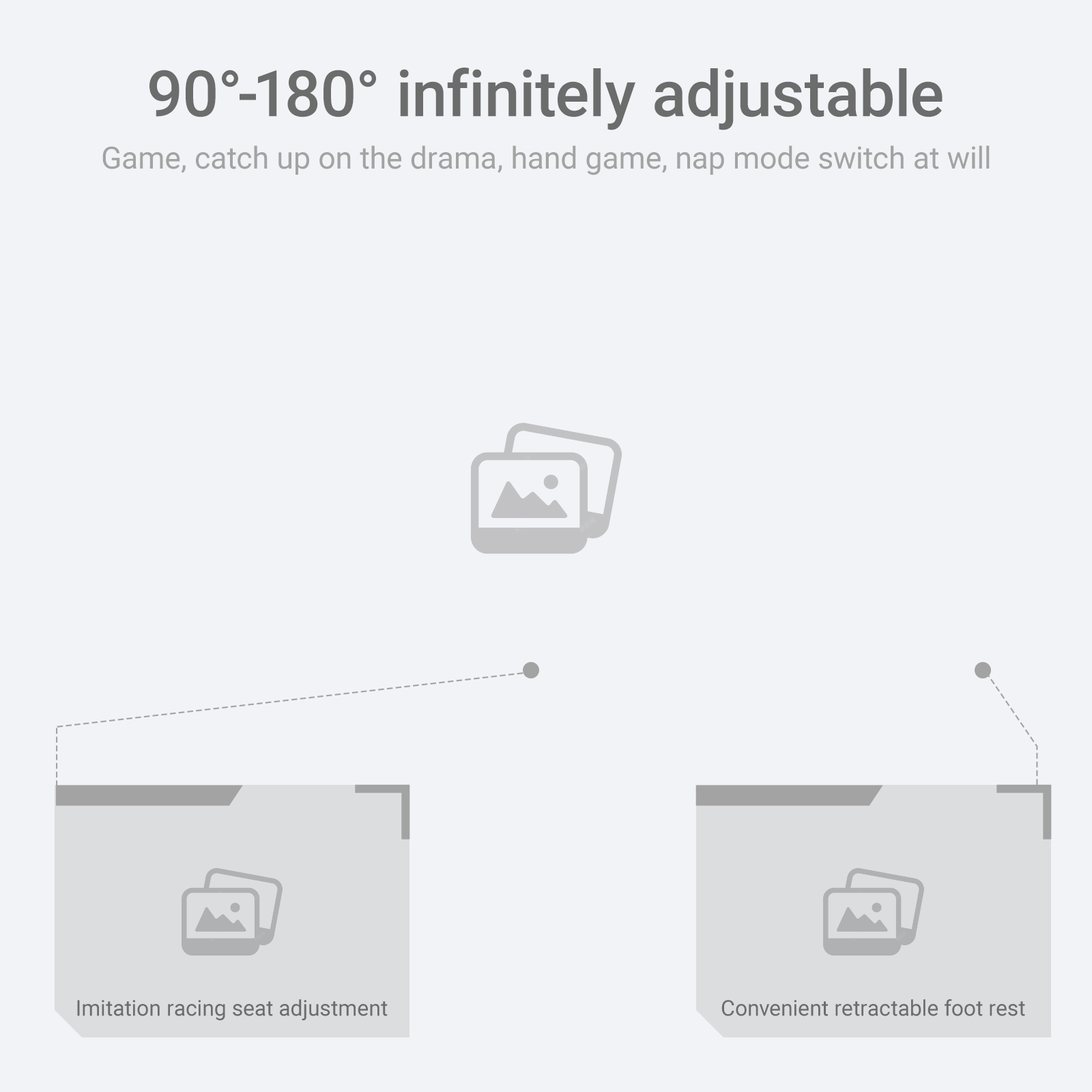
<style>
.page{position:relative;width:1092px;height:1092px;background:#f2f3f6}
.page>*{position:absolute;margin:0}
.t1{font:64.1px "Roboto-Medium";color:#6c6c6c}
.t2{font:30.6px "Roboto-Regular";color:#a3a3a3}
.t3{font:21.8px "Roboto-Regular";color:#6c6c6c}
</style>
<div class="page">
<p class="t1" style="left:149px;top:68px;width:794px;height:62px">90°-180° infinitely adjustable</p>
<p class="t2" style="left:102px;top:145px;width:888px;height:30px">Game, catch up on the drama, hand game, nap mode switch at will</p>
<p class="t3" style="left:77px;top:999px;width:311px;height:21px">Imitation racing seat adjustment</p>
<p class="t3" style="left:721px;top:999px;width:304px;height:17px">Convenient retractable foot rest</p>
</div>
